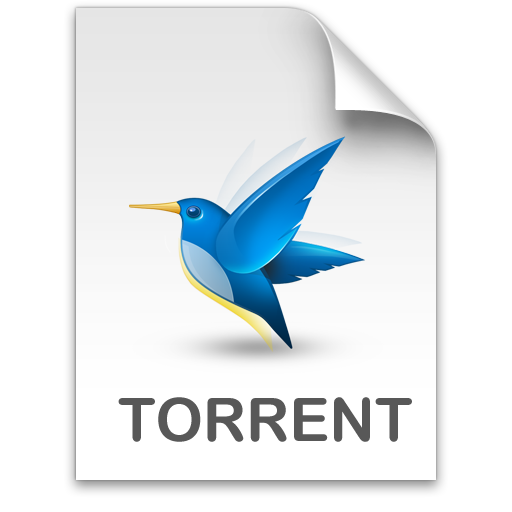
<style>
.page{position:relative;width:512px;height:512px;background:#ffffff}
.page>*{position:absolute;margin:0}
.t1{font:60px "ArialRoundedMTBold";color:#585858}
</style>
<div class="page">
<p class="t1" style="left:118px;top:397px;width:294px;height:45px">TORRENT</p>
</div>
